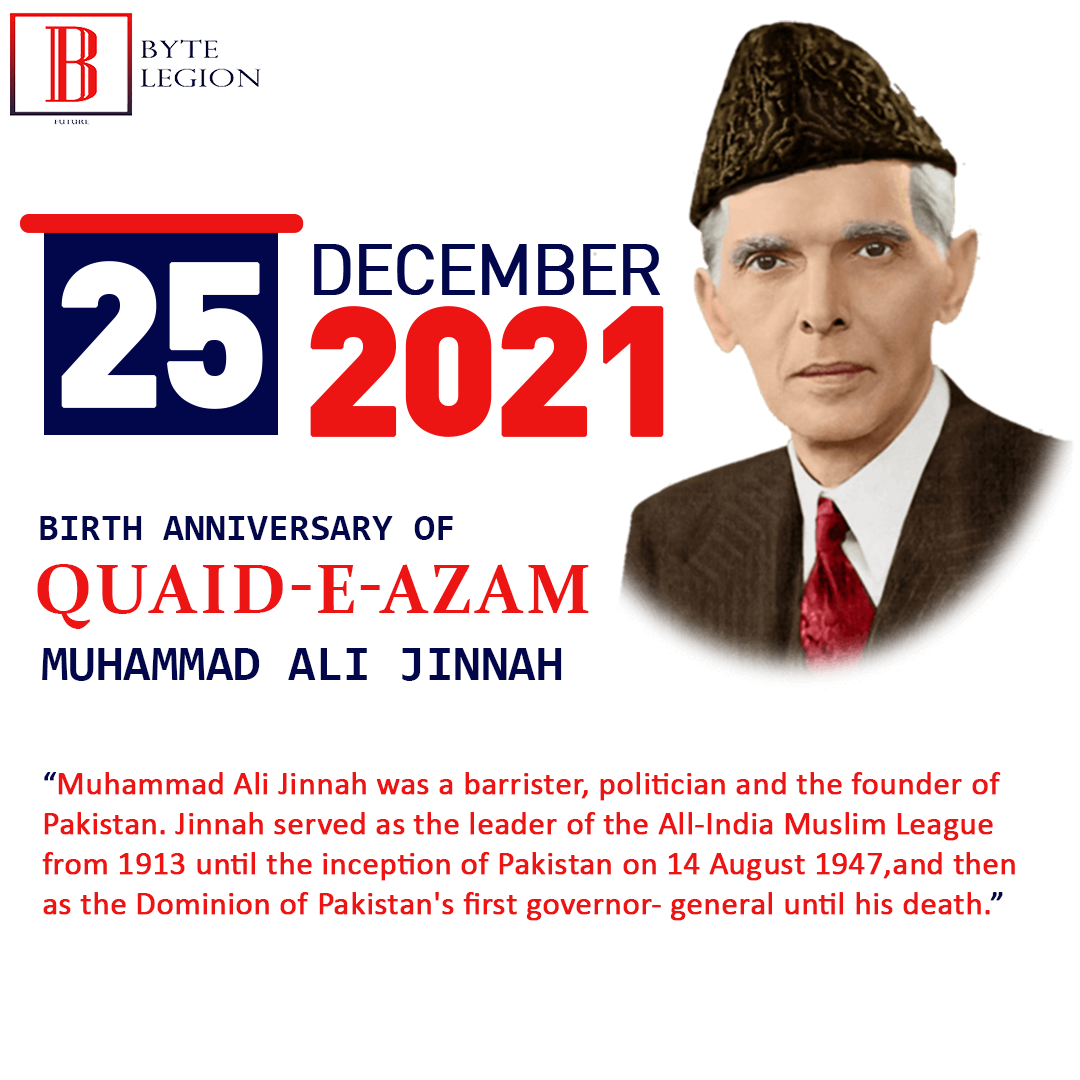
<style>
.page{position:relative;width:1080px;height:1080px;background:#ffffff}
.page>*{position:absolute;margin:0}
.t1{font:70px "DIN";letter-spacing:-0.05em;color:#02074c;text-transform:uppercase;font-weight:bold}
.t2{font:199.1px "DIN-Black";letter-spacing:-0.05em;color:#ffffff;text-transform:uppercase;font-weight:bold}
.t3{font:178.9px "DIN-Black";letter-spacing:-0.05em;color:#ed1414;text-transform:uppercase;font-weight:bold}
.t4{font:38px "Consolas-Bold";color:#02074c;text-transform:uppercase}
.t5{font:70px "Constantia-Bold";letter-spacing:-0.01em;color:#ed1414;text-transform:uppercase}
.t6{font:50px "Consolas-Bold";color:#02074c;text-transform:uppercase}
.t7{font:32.5px/39.9px "Calibri";color:#ed1414;font-weight:bold}
.t8{font:32.5px/39.9px "Calibri";color:#02074c;font-weight:bold}
</style>
<div class="page">
<p class="t1" style="left:314px;top:244px;width:346px;height:51px">DECEMBER</p>
<p class="t2" style="left:61px;top:261px;width:202px;height:148px">25</p>
<p class="t3" style="left:310px;top:306px;width:354px;height:131px">2021</p>
<p class="t4" style="left:40px;top:516px;width:413px;height:24px">Birth Anniversary of</p>
<p class="t5" style="left:37px;top:564px;width:552px;height:65px">QUAID-E-AZAM</p>
<p class="t6" style="left:42px;top:648px;width:520px;height:33px">MUHAMMAD ALI JINNAH</p>
<p class="t7" style="left:42px;top:772px;width:973px;height:149px"><span class="t8">“</span>Muhammad Ali Jinnah was a barrister, politician and the founder of<br>Pakistan. Jinnah served as the leader of the All-India Muslim League<br>from 1913 until the inception of Pakistan on 14 August 1947,and then<br>as the Dominion of Pakistan's first governor- general until his death.<span class="t8">”</span></p>
</div>
